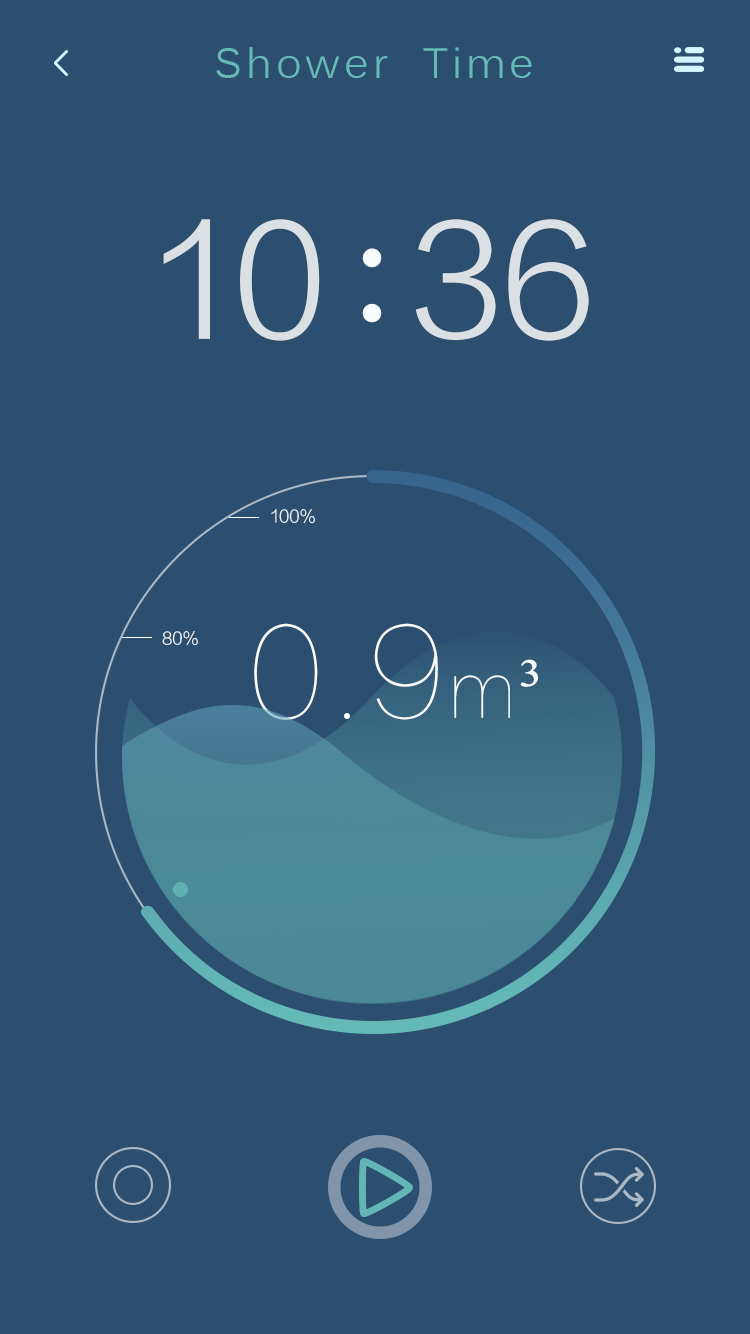
<style>
.page{position:relative;width:750px;height:1334px;background:#2c4e6f}
.page>*{position:absolute;margin:0}
.t1{font:41.7px "Kalinga";letter-spacing:0.1em;color:#65bab8}
.t2{font:150px "FZLTXIHJW--GB1-0";color:#dbe0e4}
.t3{font:150px "STZhongsong";color:#f9fcfc}
.t4{font:16.7px "FZLTXHJW--GB1-0";color:#f9fcfc}
.t5{font:125px "FZLTCXHJW--GB1-0";color:#f9fcfc}
.t6{font:75px "FZLTCXHJW--GB1-0";color:#f9fcfc}
.t7{font:75px "SimSun";color:#f9fcfc}
</style>
<div class="page">
<p class="t1" style="left:216px;top:47px;width:316px;height:31px">Shower  Time</p>
<p class="t2" style="left:163px;top:219px;width:426px;height:122px">10  36</p>
<p class="t3" style="left:362px;top:248px;width:20px;height:75px">:</p>
<p class="t4" style="left:271px;top:509px;width:44px;height:15px">100%</p>
<p class="t5" style="left:254px;top:623px;width:284px;height:97px">0 9<span class="t6">m</span><span class="t7">³</span></p>
<p class="t4" style="left:162px;top:631px;width:36px;height:15px">80%</p>
</div>
